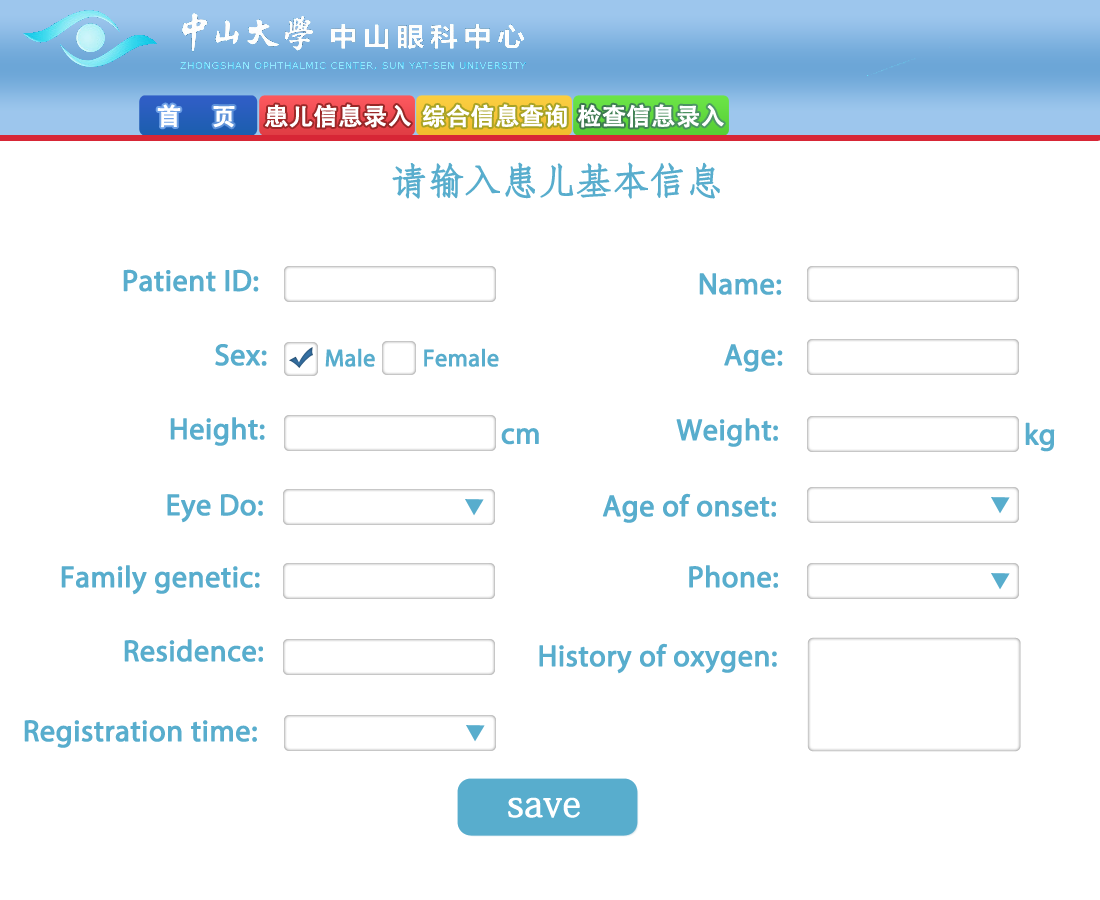
<style>
.page{position:relative;width:1100px;height:900px;background:#ffffff}
.page>*{position:absolute;margin:0}
.t1{font:36px "AdobeFangsongStd-Regular";color:#58adcd;font-weight:bold}
.t2{font:30px "MyriadPro-Regular";color:#58adcd;font-weight:bold}
.t3{font:30px "AdobeFangsongStd-Regular";color:#58adcd;font-weight:bold}
.t4{font:24px "MyriadPro-Regular";color:#58adcd;font-weight:bold}
.t5{font:36px "AdobeFangsongStd-Regular";color:#ffffff;font-weight:bold}
</style>
<div class="page">
<p class="t1" style="left:392px;top:162px;width:328px;height:37px">请输入患儿基本信息</p>
<p class="t2" style="left:123px;top:269px;width:136px;height:23px">Patient ID:</p>
<p class="t2" style="left:699px;top:273px;width:83px;height:22px">Name:</p>
<p class="t2" style="left:215px;top:344px;width:52px;height:22px"><span class="t3">   </span>Sex:</p>
<p class="t4" style="left:325px;top:348px;width:50px;height:19px">Male</p>
<p class="t4" style="left:424px;top:348px;width:75px;height:19px">Female</p>
<p class="t2" style="left:724px;top:344px;width:59px;height:28px">Age:</p>
<p class="t2" style="left:170px;top:417px;width:95px;height:29px">Height:</p>
<p class="t2" style="left:676px;top:418px;width:102px;height:29px"><span class="t3">   </span>Weight:</p>
<p class="t2" style="left:1025px;top:422px;width:30px;height:30px">kg</p>
<p class="t2" style="left:501px;top:428px;width:38px;height:17px">cm</p>
<p class="t2" style="left:167px;top:494px;width:96px;height:29px"><span class="t3">   </span>Eye Do:</p>
<p class="t2" style="left:602px;top:493px;width:174px;height:30px"><span class="t3">   </span>Age of onset:</p>
<p class="t2" style="left:61px;top:565px;width:199px;height:30px">Family genetic:</p>
<p class="t2" style="left:689px;top:565px;width:89px;height:23px"><span class="t3">  </span> Phone:</p>
<p class="t2" style="left:124px;top:639px;width:139px;height:23px">Residence:</p>
<p class="t2" style="left:539px;top:643px;width:238px;height:31px"><span class="t3">   </span>History of oxygen:</p>
<p class="t2" style="left:24px;top:720px;width:233px;height:28px">Registration time:</p>
<p class="t5" style="left:508px;top:797px;width:72px;height:21px">save</p>
</div>
